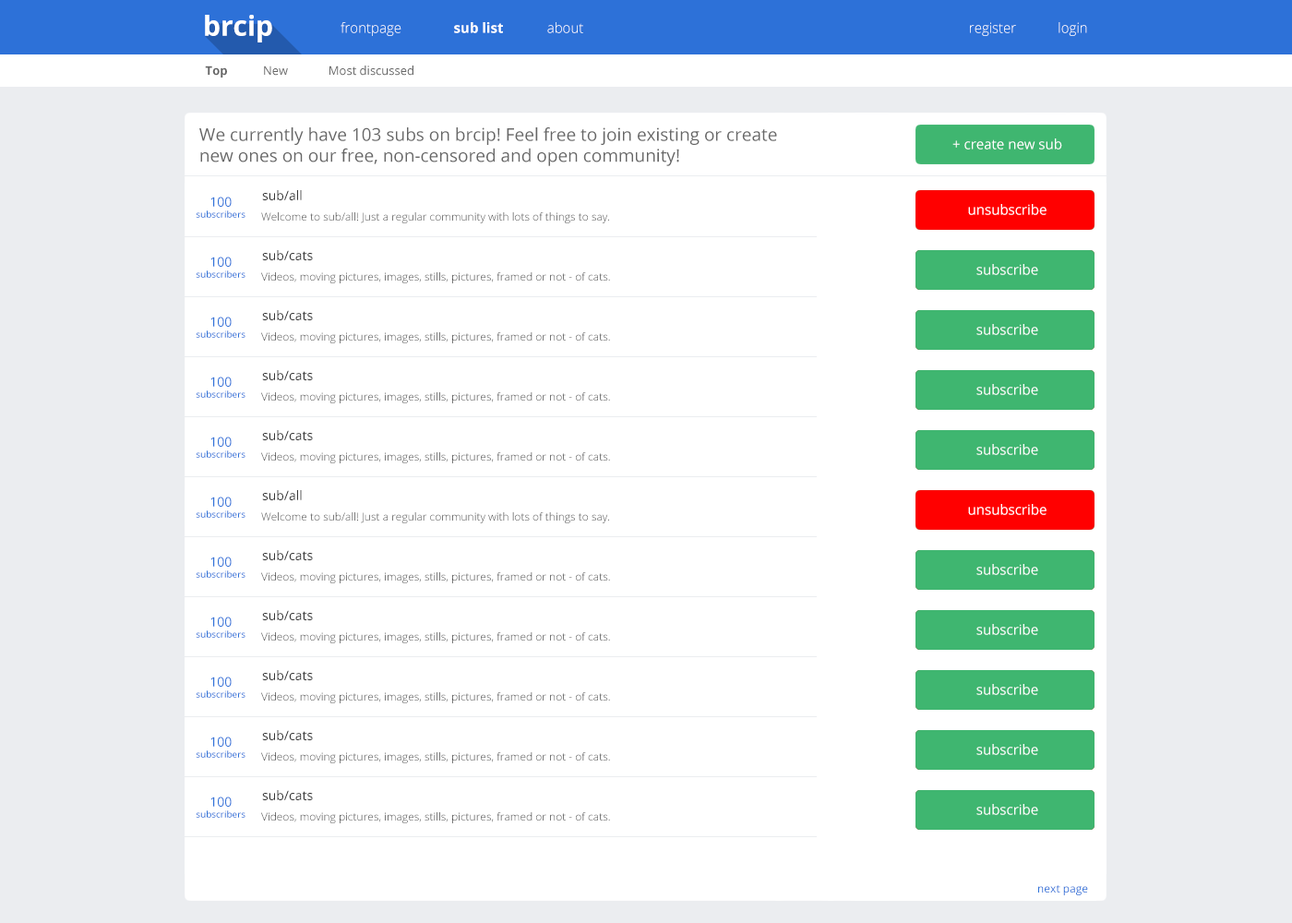
<style>
.page{position:relative;width:1292px;height:923px;background:#ffffff}
.page>*{position:absolute;margin:0}
.t1{font:27.7px "OpenSans-Bold";color:#ffffff}
.t2{font:13.8px "OpenSans-Light"}
.t3{font:13.8px "OpenSans-Bold";color:#ffffff}
.t4{font:13.8px "OpenSans-Light";color:#ffffff}
.t5{font:12px "OpenSans-Bold";color:#666666}
.t6{font:12px "OpenSans";color:#666666}
.t7{font:17.5px "OpenSans";color:#666666}
.t8{font:13.8px "OpenSans";color:#ffffff}
.t9{font:9.2px "OpenSans";color:#2d71d8}
.t10{font:12.9px "OpenSans";color:#2d71d8}
.t11{font:12.9px "OpenSans";color:#333333}
.t12{font:11.1px "OpenSans-Light"}
.t13{font:11.1px "OpenSans";color:#2d71d8}
</style>
<div class="page">
<p class="t1" style="left:205px;top:15px;width:67px;height:27px">brcip</p>
<p class="t2" style="left:341px;top:22px;width:60px;height:14px">frontpage</p>
<p class="t3" style="left:454px;top:22px;width:49px;height:11px">sub list</p>
<p class="t4" style="left:547px;top:22px;width:36px;height:11px">about</p>
<p class="t4" style="left:970px;top:22px;width:46px;height:14px">register</p>
<p class="t4" style="left:1059px;top:22px;width:28px;height:14px">login</p>
<p class="t5" style="left:205px;top:66px;width:22px;height:12px">Top</p>
<p class="t6" style="left:264px;top:66px;width:24px;height:10px">New</p>
<p class="t6" style="left:329px;top:66px;width:84px;height:10px">Most discussed</p>
<p class="t7" style="left:199px;top:127px;width:578px;height:39px">We currently have 103 subs on brcip! Feel free to join existing or create new ones on our free, non-censored and open community!</p>
<p class="t8" style="left:952px;top:138px;width:110px;height:12px">+ create new sub</p>
<p class="t9" style="left:196px;top:197px;width:49px;height:21px;text-align:center"><span class="t10">100 <br></span>subscribers</p>
<p class="t11" style="left:262px;top:190px;width:40px;height:10px">sub/all</p>
<p class="t8" style="left:968px;top:204px;width:79px;height:11px">unsubscribe</p>
<p class="t12" style="left:261px;top:212px;width:348px;height:11px">Welcome to sub/all! Just a regular community with lots of things to say.</p>
<p class="t9" style="left:196px;top:257px;width:49px;height:21px;text-align:center"><span class="t10">100 <br></span>subscribers</p>
<p class="t11" style="left:262px;top:250px;width:51px;height:10px">sub/cats</p>
<p class="t8" style="left:976px;top:264px;width:62px;height:11px">subscribe</p>
<p class="t12" style="left:261px;top:272px;width:349px;height:11px">Videos, moving pictures, images, stills, pictures, framed or not - of cats.</p>
<p class="t9" style="left:196px;top:317px;width:49px;height:21px;text-align:center"><span class="t10">100 <br></span>subscribers</p>
<p class="t11" style="left:262px;top:310px;width:51px;height:10px">sub/cats</p>
<p class="t8" style="left:976px;top:324px;width:62px;height:11px">subscribe</p>
<p class="t12" style="left:261px;top:332px;width:349px;height:11px">Videos, moving pictures, images, stills, pictures, framed or not - of cats.</p>
<p class="t9" style="left:196px;top:377px;width:49px;height:21px;text-align:center"><span class="t10">100 <br></span>subscribers</p>
<p class="t11" style="left:262px;top:370px;width:51px;height:10px">sub/cats</p>
<p class="t8" style="left:976px;top:384px;width:62px;height:11px">subscribe</p>
<p class="t12" style="left:261px;top:392px;width:349px;height:11px">Videos, moving pictures, images, stills, pictures, framed or not - of cats.</p>
<p class="t9" style="left:196px;top:437px;width:49px;height:21px;text-align:center"><span class="t10">100 <br></span>subscribers</p>
<p class="t11" style="left:262px;top:430px;width:51px;height:10px">sub/cats</p>
<p class="t8" style="left:976px;top:444px;width:62px;height:11px">subscribe</p>
<p class="t12" style="left:261px;top:452px;width:349px;height:11px">Videos, moving pictures, images, stills, pictures, framed or not - of cats.</p>
<p class="t9" style="left:196px;top:497px;width:49px;height:21px;text-align:center"><span class="t10">100 <br></span>subscribers</p>
<p class="t11" style="left:262px;top:490px;width:40px;height:10px">sub/all</p>
<p class="t8" style="left:968px;top:504px;width:79px;height:11px">unsubscribe</p>
<p class="t12" style="left:261px;top:512px;width:348px;height:11px">Welcome to sub/all! Just a regular community with lots of things to say.</p>
<p class="t9" style="left:196px;top:557px;width:49px;height:21px;text-align:center"><span class="t10">100 <br></span>subscribers</p>
<p class="t11" style="left:262px;top:550px;width:51px;height:10px">sub/cats</p>
<p class="t8" style="left:976px;top:564px;width:62px;height:11px">subscribe</p>
<p class="t12" style="left:261px;top:572px;width:349px;height:11px">Videos, moving pictures, images, stills, pictures, framed or not - of cats.</p>
<p class="t9" style="left:196px;top:616px;width:49px;height:22px;text-align:center"><span class="t10">100 <br></span>subscribers</p>
<p class="t11" style="left:262px;top:610px;width:51px;height:10px">sub/cats</p>
<p class="t8" style="left:976px;top:624px;width:62px;height:11px">subscribe</p>
<p class="t12" style="left:261px;top:632px;width:349px;height:11px">Videos, moving pictures, images, stills, pictures, framed or not - of cats.</p>
<p class="t9" style="left:196px;top:676px;width:49px;height:22px;text-align:center"><span class="t10">100 <br></span>subscribers</p>
<p class="t11" style="left:262px;top:670px;width:51px;height:10px">sub/cats</p>
<p class="t8" style="left:976px;top:684px;width:62px;height:11px">subscribe</p>
<p class="t12" style="left:261px;top:692px;width:349px;height:11px">Videos, moving pictures, images, stills, pictures, framed or not - of cats.</p>
<p class="t9" style="left:196px;top:736px;width:49px;height:22px;text-align:center"><span class="t10">100 <br></span>subscribers</p>
<p class="t11" style="left:262px;top:730px;width:51px;height:10px">sub/cats</p>
<p class="t8" style="left:976px;top:744px;width:62px;height:11px">subscribe</p>
<p class="t12" style="left:261px;top:752px;width:349px;height:11px">Videos, moving pictures, images, stills, pictures, framed or not - of cats.</p>
<p class="t9" style="left:196px;top:796px;width:49px;height:22px;text-align:center"><span class="t10">100 <br></span>subscribers</p>
<p class="t11" style="left:262px;top:790px;width:51px;height:10px">sub/cats</p>
<p class="t8" style="left:976px;top:804px;width:62px;height:11px">subscribe</p>
<p class="t12" style="left:261px;top:812px;width:349px;height:11px">Videos, moving pictures, images, stills, pictures, framed or not - of cats.</p>
<p class="t13" style="left:1038px;top:885px;width:50px;height:10px">next page</p>
</div>
